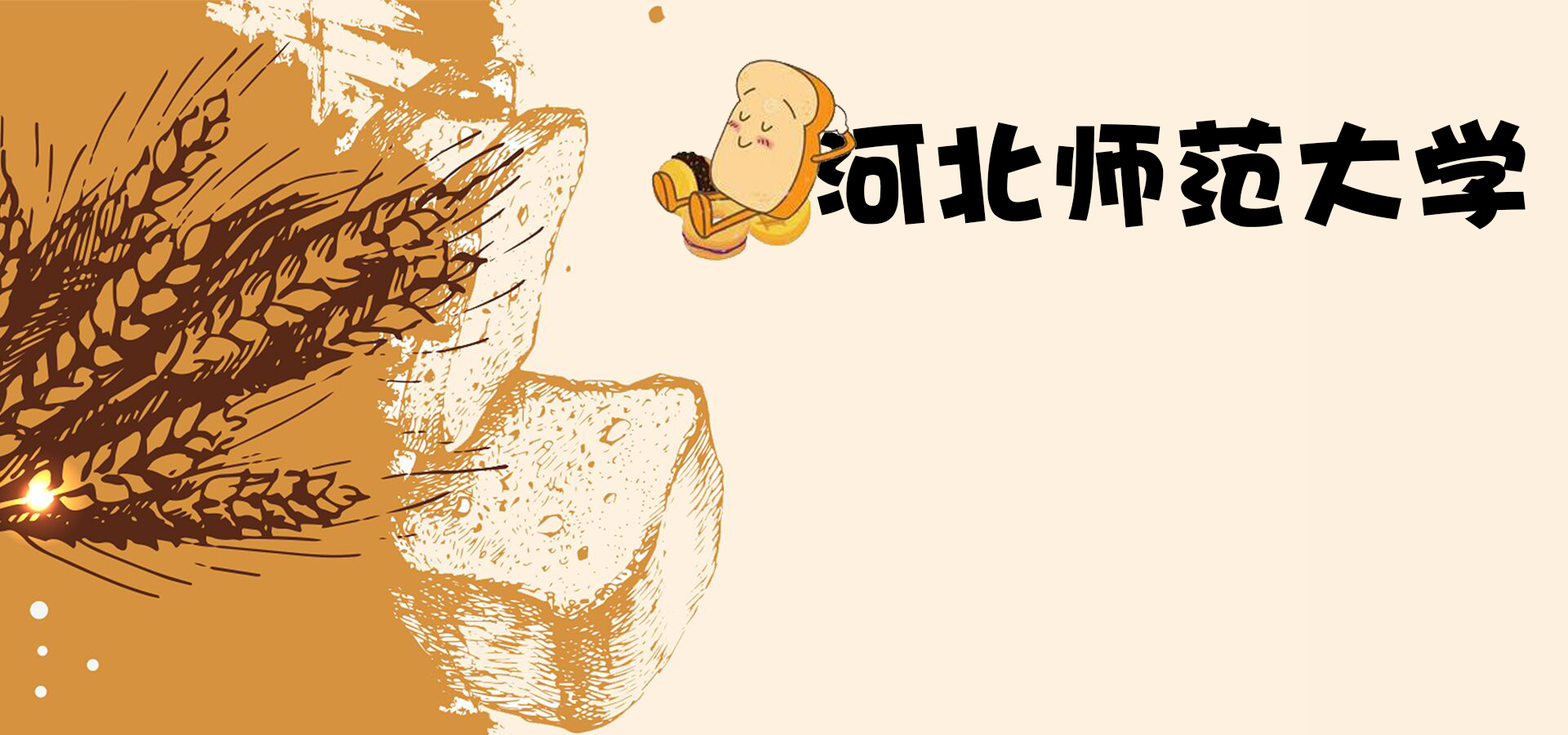
<style>
.page{position:relative;width:1568px;height:735px;background:#fef1e0}
.page>*{position:absolute;margin:0}
.t1{font:120.1px "DFHaiBaoW12";color:#000000}
</style>
<div class="page">
<p class="t1" style="left:815px;top:118px;width:711px;height:111px">河北师范大学</p>
</div>
